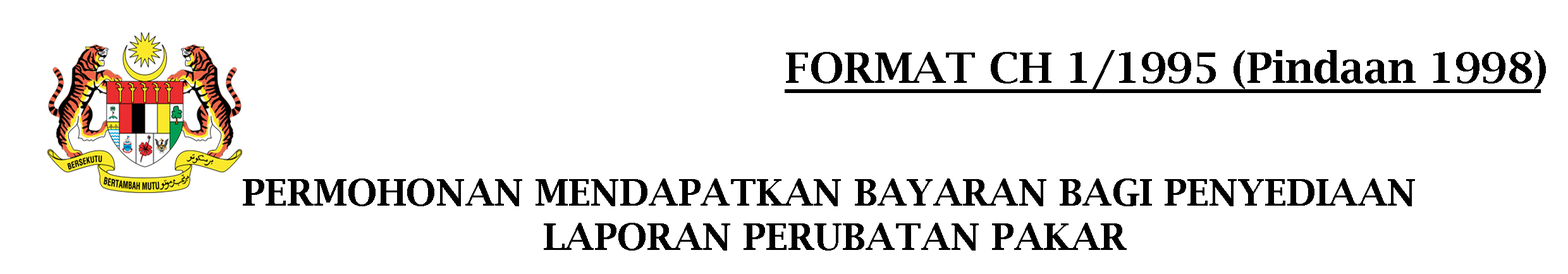
<style>
.page{position:relative;width:1568px;height:274px;background:#ffffff}
.page>*{position:absolute;margin:0}
.t1{font:42.2px "LucidaBright-Demi";color:#000000}
.t2{font:36.9px "LucidaBright-Demi";color:#000000}
</style>
<div class="page">
<p class="t1" style="left:786px;top:50px;width:760px;height:39px">FORMAT CH 1/1995 (Pindaan 1998)</p>
<p class="t2" style="left:243px;top:178px;width:1172px;height:72px;text-align:center">PERMOHONAN MENDAPATKAN BAYARAN BAGI PENYEDIAAN <br>LAPORAN PERUBATAN PAKAR</p>
</div>
